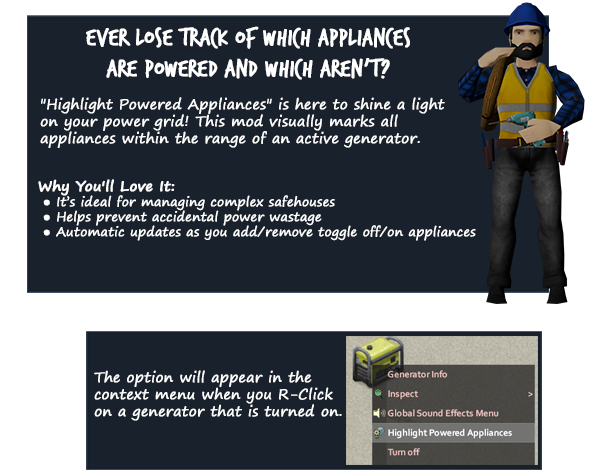
<style>
.page{position:relative;width:600px;height:470px;background:#19222c}
.page>*{position:absolute;margin:0}
.t1{font:25.7px "TrashHand";color:#ffffff;font-weight:bold}
.t2{font:13.9px "SegoePrint";color:#ffffff;font-weight:bold}
.t3{font:12.4px "SegoePrint";color:#ffffff;font-weight:bold}
.t4{font:13.9px "SegoePrint-Bold";color:#ffffff;font-weight:bold}
</style>
<div class="page">
<p class="t1" style="left:86px;top:26px;width:324px;height:54px;text-align:center">Ever lose track of which appliances <br>are powered and which aren't?</p>
<p class="t2" style="left:40px;top:97px;width:405px;height:51px">"Highlight Powered Appliances" is here to shine a light <br>on your power grid! This mod visually marks all <br>appliances within the range of an active generator.</p>
<p class="t3" style="left:38px;top:179px;width:438px;height:62px"><span class="t4">Why You'll Love It:<br></span> ● It’s ideal for managing complex safehouses<br> ● Helps prevent accidental power wastage<br> ● Automatic updates as you add/remove toggle off/on appliances</p>
<p class="t2" style="left:94px;top:370px;width:248px;height:51px">The option will appear in the <br>context menu when you R-Click <br>on a generator that is turned on.</p>
</div>
